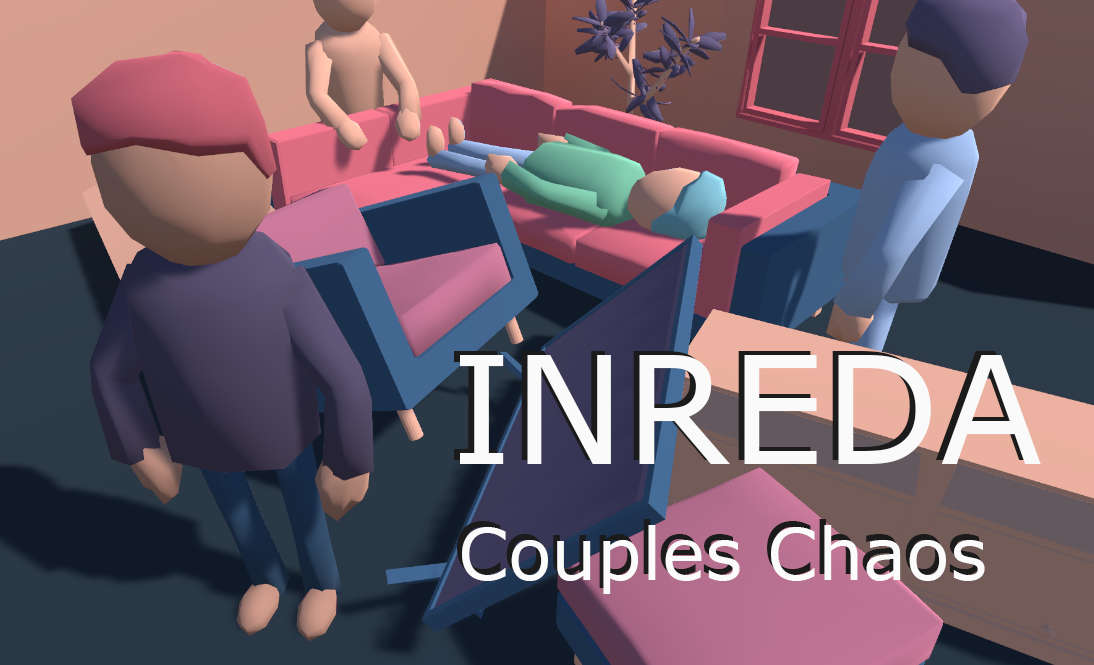
<style>
.page{position:relative;width:1094px;height:665px}
.page>*{position:absolute;margin:0}
.t1{font:150px "Verdana";color:#fafafa}
.t2{font:72px "Verdana";color:#fbfbfb}
</style>
<div class="page">
<p class="t1" style="left:460px;top:355px;width:581px;height:109px">INREDA</p>
<p class="t2" style="left:462px;top:525px;width:523px;height:69px">Couples Chaos</p>
</div>
